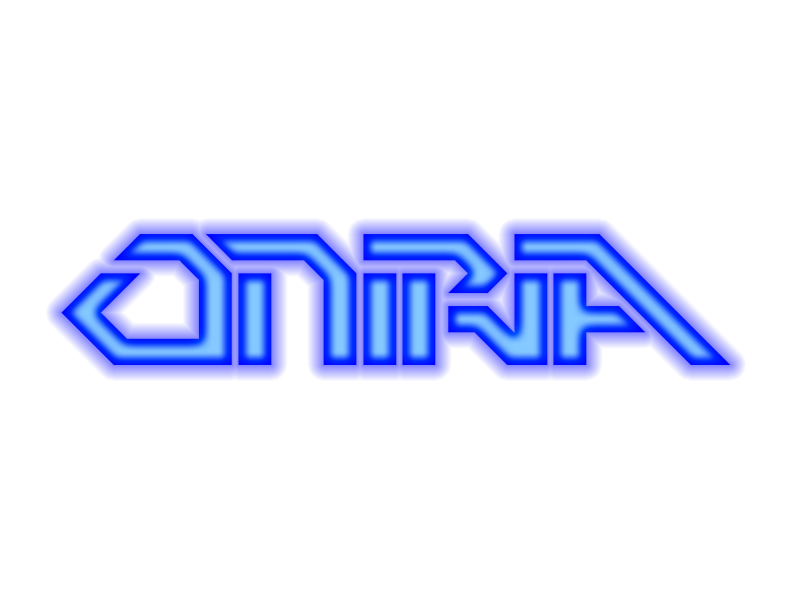
<style>
.page{position:relative;width:800px;height:600px;background:#ffffff}
.page>*{position:absolute;margin:0}
.t1{font:187.5px "PerfectDarkBRK"}
</style>
<div class="page">
<p class="t1" style="left:61px;top:234px;width:670px;height:131px">Oniria</p>
</div>
